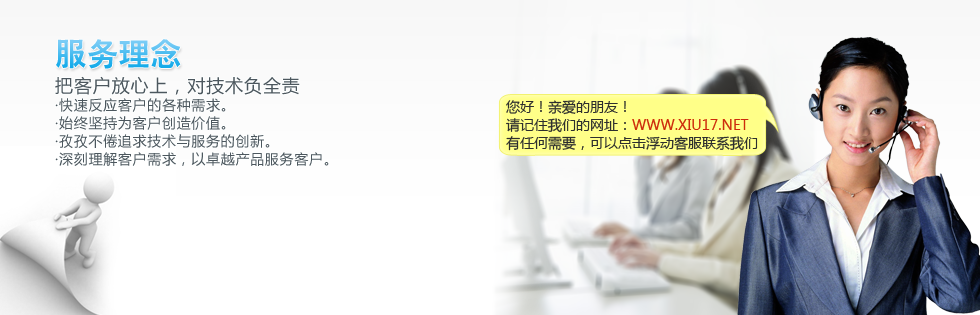
<style>
.page{position:relative;width:980px;height:315px}
.page>*{position:absolute;margin:0}
.t1{font:30px "-G-h-e-i-0-1-h";letter-spacing:0.05em}
.t2{font:14px/18px "MicrosoftYaHei";letter-spacing:0.05em;color:#4c575e}
.t3{font:18px/18px "MicrosoftYaHei";letter-spacing:0.05em;color:#4c575e}
.t4{font:14px/18px "MicrosoftYaHei";color:#2d2e2e;text-transform:uppercase}
.t5{font:14px/18px "MicrosoftYaHei";color:#cd2b0b;text-transform:uppercase}
</style>
<div class="page">
<p class="t1" style="left:56px;top:39px;width:125px;height:30px">服务理念</p>
<p class="t2" style="left:55px;top:76px;width:274px;height:90px"><span class="t3">把客户放心上，对技术负全责<br></span>·快速反应客户的各种需求。<br>·始终坚持为客户创造价值。<br>·孜孜不倦追求技术与服务的创新。<br>·深刻理解客户需求，以卓越产品服务客户。</p>
<p class="t4" style="left:506px;top:100px;width:252px;height:51px">您好！亲爱的朋友！<br>请记住我们的网址：<span class="t5">www.xiu17.net<br></span>有任何需要，可以点击浮动客服联系我们</p>
</div>
